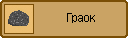
<style>
.page{position:relative;width:128px;height:38px;background:#caa364}
.page>*{position:absolute;margin:0}
.t1{font:12px "XENOA";color:#000000}
</style>
<div class="page">
<p class="t1" style="left:67px;top:13px;width:28px;height:10px">Граок</p>
</div>
